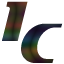
<style>
.page{position:relative;width:64px;height:64px;background:#ffffff}
.page>*{position:absolute;margin:0}
.t1{font:68px "DSMotionDemo-Italic"}
</style>
<div class="page">
<p class="t1" style="left:2px;top:1px;width:26px;height:40px">I</p>
<p class="t1" style="left:21px;top:23px;width:42px;height:40px">C</p>
</div>
